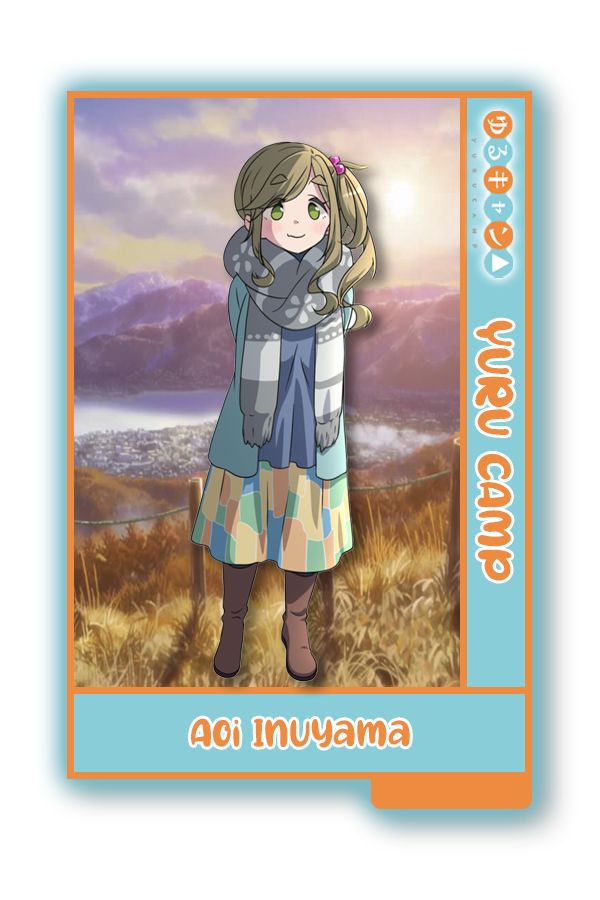
<style>
.page{position:relative;width:600px;height:900px;background:#ffffff}
.page>*{position:absolute;margin:0}
.t1{font:48.8px "OhMyBaby";color:#ed8c41}
.t2{font:41.1px "OhMyBaby";color:#ed8c41;scale:0.94 1}
</style>
<div class="page">
<p class="t1" style="left:475px;top:320px;width:39px;height:261px;rotate:90deg">YURU CAMP</p>
<p class="t2" style="left:190px;top:718px;width:220px;height:30px">Aoi Inuyama</p>
</div>
